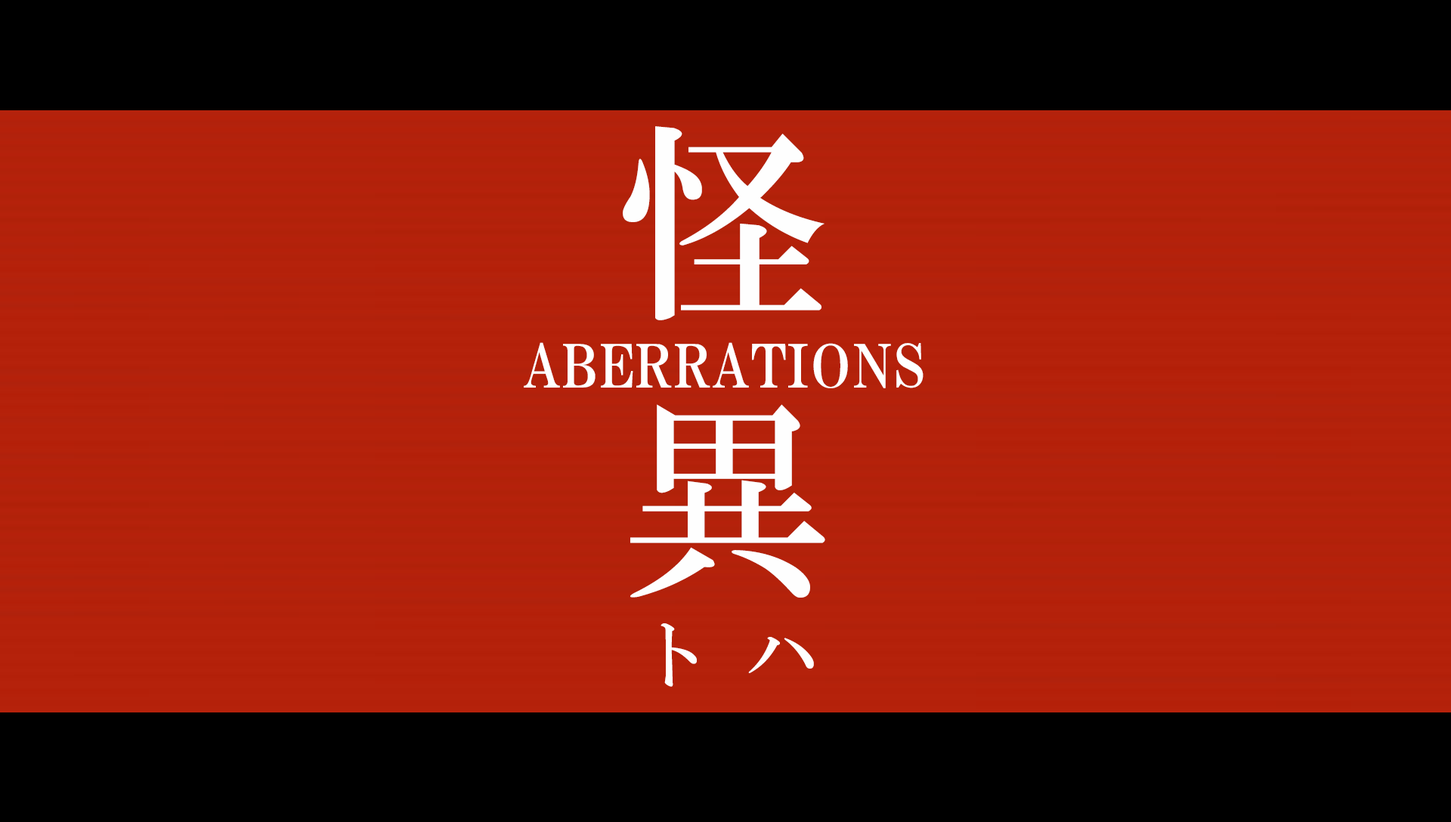
<style>
.page{position:relative;width:1451px;height:822px;background:#000000}
.page>*{position:absolute;margin:0}
.t1{font:212.8px/35px "HGMinchoB";letter-spacing:0.3em;color:#fefefe}
.t2{font:58.9px "HGPMinchoE";letter-spacing:0.025em;color:#ffffff;text-transform:uppercase}
.t3{font:71.8px "HGMinchoB";letter-spacing:0.5em;color:#fefefe}
</style>
<div class="page">
<p class="t1" style="left:623px;top:126px;width:202px;height:472px">怪異</p>
<p class="t2" style="left:524px;top:342px;width:399px;height:46px">Aberrations</p>
<p class="t3" style="left:660px;top:623px;width:154px;height:64px">トハ</p>
</div>
